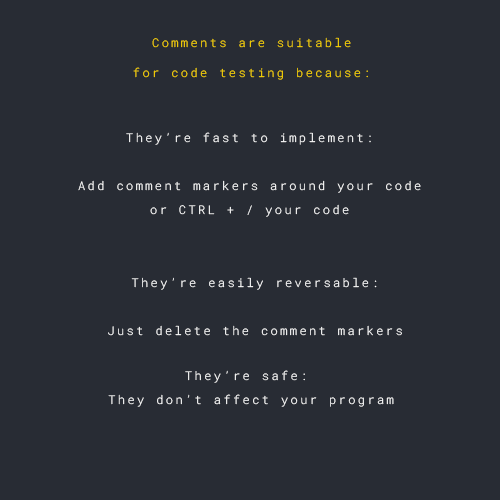
<style>
.page{position:relative;width:500px;height:500px;background:#282c34}
.page>*{position:absolute;margin:0}
.t1{font:12px/30px "RobotoMono-Light";letter-spacing:0.2em;color:#ffd800}
.t2{font:12px/24px "RobotoMono-Light";letter-spacing:0.2em;color:#ffffff}
</style>
<div class="page">
<p class="t1" style="left:133px;top:37px;width:235px;height:43px;text-align:center">Comments are suitable<br>for code testing because:</p>
<p class="t2" style="left:78px;top:132px;width:343px;height:85px;text-align:center">They’re fast to implement:<br><br>Add comment markers around your code<br>or CTRL + / your code</p>
<p class="t2" style="left:108px;top:277px;width:294px;height:59px;text-align:center">They’re easily reversable:<br><br>Just delete the comment markers</p>
<p class="t2" style="left:108px;top:370px;width:286px;height:37px;text-align:center">They’re safe: <br>They don’t affect your program</p>
</div>
